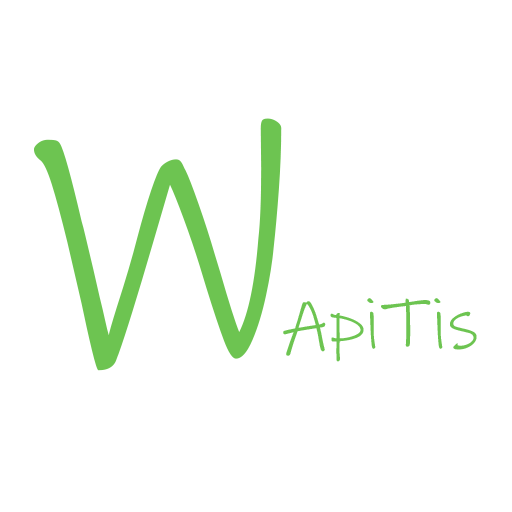
<style>
.page{position:relative;width:512px;height:512px;background:#ffffff}
.page>*{position:absolute;margin:0}
.t1{font:400px "InkFree";color:#6dc451}
.t2{font:72px "InkFree";color:#6dc451}
</style>
<div class="page">
<p class="t1" style="left:34px;top:118px;width:248px;height:253px">W</p>
<p class="t2" style="left:283px;top:298px;width:194px;height:64px">ApiTis</p>
</div>
